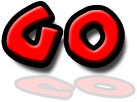
<style>
.page{position:relative;width:137px;height:102px;background:#ffffff}
.page>*{position:absolute;margin:0}
.t1{font:120px "300Trojans"}
.t2{font:61px "300Trojans";color:#ffd6d6;scale:1.97 1}
</style>
<div class="page">
<p class="t1" style="left:6px;top:6px;width:114px;height:57px">G     o</p>
<p class="t2" style="left:17px;top:78px;width:116px;height:20px">G  o</p>
</div>
